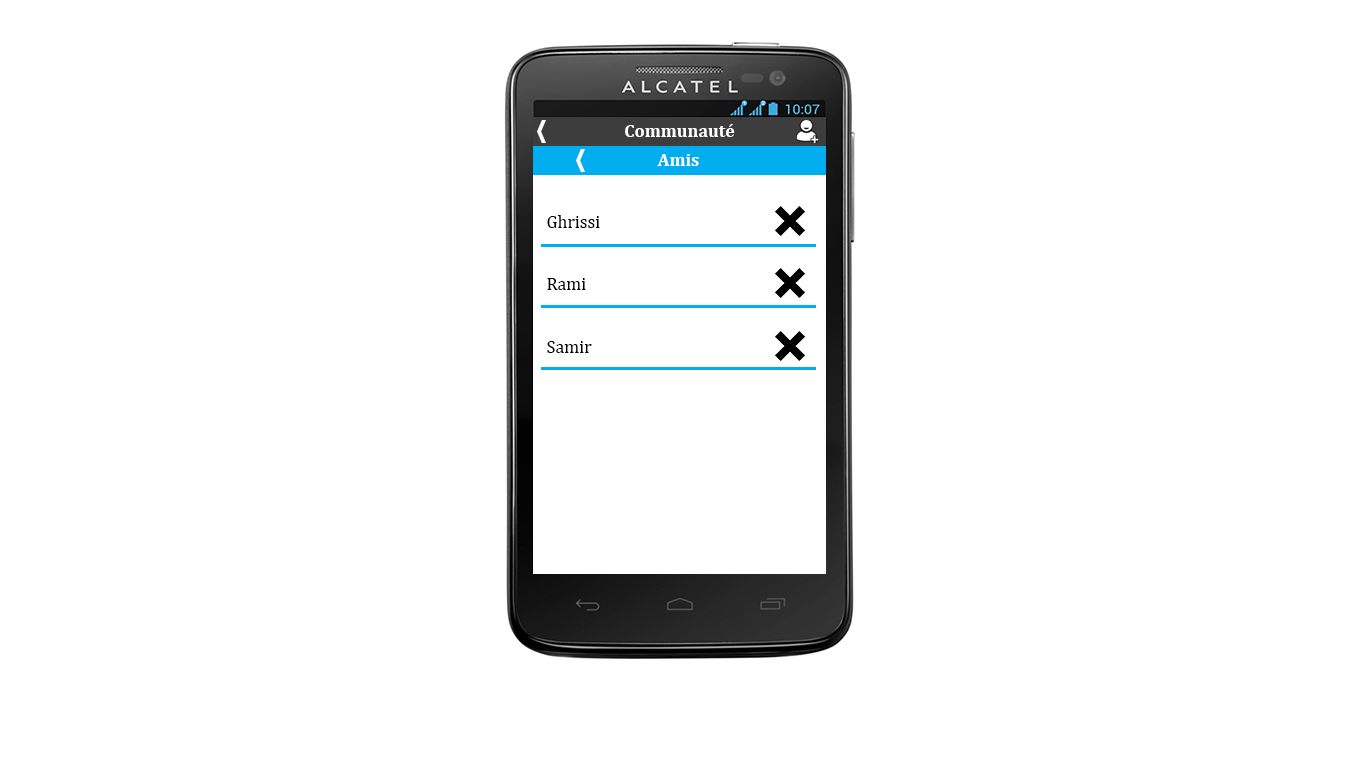
<style>
.page{position:relative;width:1366px;height:768px;background:#ffffff}
.page>*{position:absolute;margin:0}
.t1{font:18px "Cambria-Bold";color:#ffffff}
.t2{font:18px "Cambria";color:#000000}
</style>
<div class="page">
<p class="t1" style="left:625px;top:124px;width:110px;height:13px">Communauté</p>
<p class="t1" style="left:657px;top:154px;width:42px;height:12px">Amis</p>
<p class="t2" style="left:547px;top:215px;width:53px;height:13px">Ghrissi</p>
<p class="t2" style="left:547px;top:278px;width:39px;height:12px">Rami</p>
<p class="t2" style="left:547px;top:341px;width:45px;height:12px">Samir</p>
</div>
